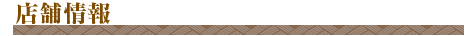
<style>
.page{position:relative;width:475px;height:36px;background:#ffffff}
.page>*{position:absolute;margin:0}
.t1{font:24px "MatissePro-B";color:#7e4c00}
</style>
<div class="page">
<p class="t1" style="left:16px;top:2px;width:94px;height:22px">店舗情報</p>
</div>
